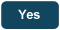
<style>
.page{position:relative;width:60px;height:30px;background:#12465e}
.page>*{position:absolute;margin:0}
.t1{font:13px "Arial-BoldMT";letter-spacing:-0.025em;color:#ffffff}
</style>
<div class="page">
<p class="t1" style="left:18px;top:9px;width:22px;height:10px">Yes</p>
</div>
